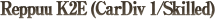
<style>
.page{position:relative;width:222px;height:19px;background:#ffffff}
.page>*{position:absolute;margin:0}
.t1{font:18px "RyuminPro-ExBold";letter-spacing:-0.08em;color:#4a3f32;font-weight:bold;scale:0.9 1}
</style>
<div class="page">
<p class="t1" style="left:0px;top:1px;width:215px;height:18px">Reppuu K2E (CarDiv 1/Skilled)</p>
</div>
